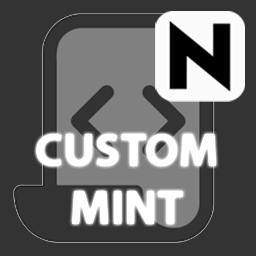
<style>
.page{position:relative;width:256px;height:256px;background:#333333}
.page>*{position:absolute;margin:0}
.t1{font:47px "MyriadPro-Bold";color:#ffffff}
.t2{font:48px "MyriadPro-Bold";color:#ffffff}
</style>
<div class="page">
<p class="t1" style="left:36px;top:134px;width:180px;height:90px;text-align:center">CUSTOM<br><span class="t2">MINT</span></p>
</div>
